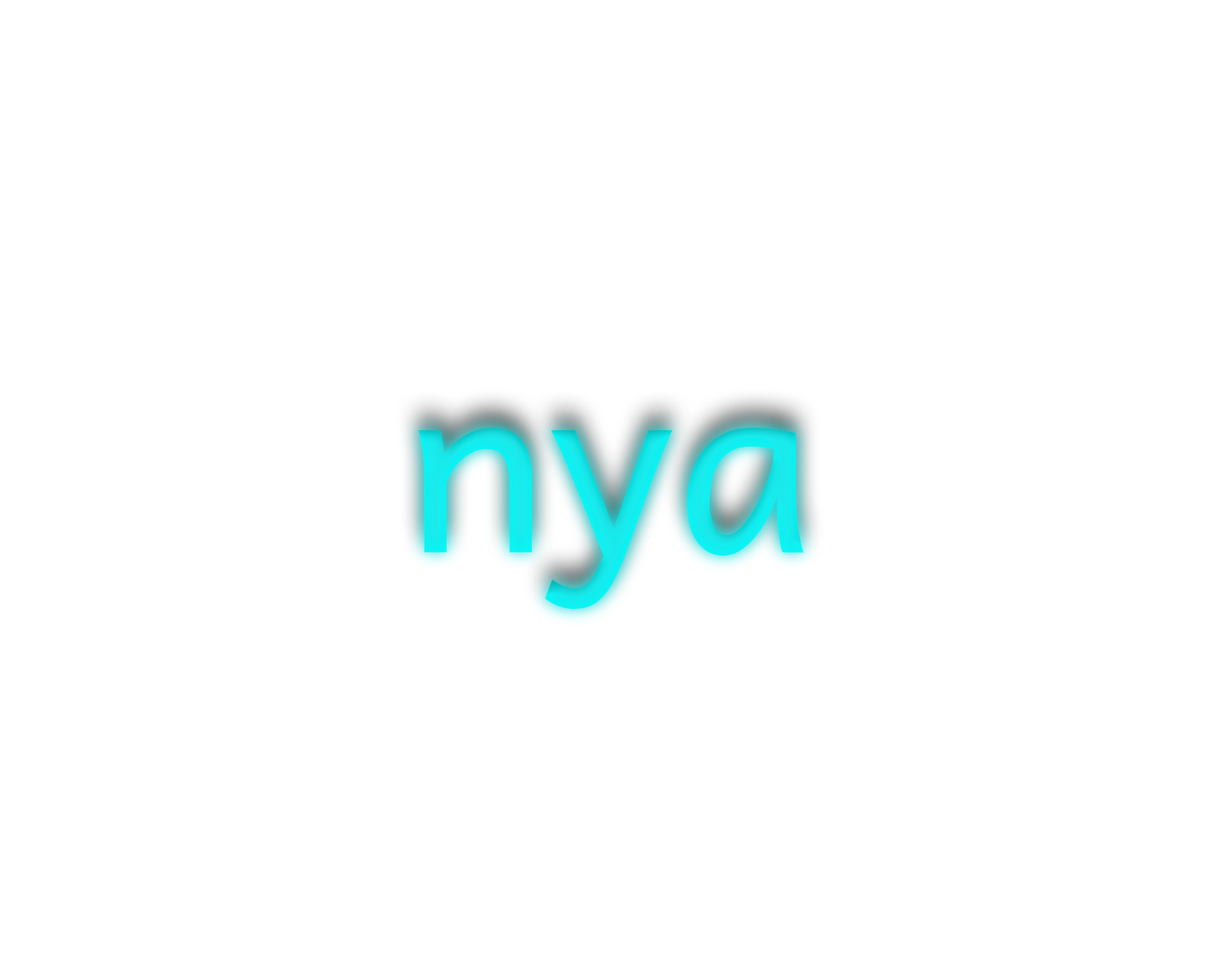
<style>
.page{position:relative;width:1222px;height:976px;background:#ffffff}
.page>*{position:absolute;margin:0}
.t1{font:245.8px "Andika";color:#16e8ea}
</style>
<div class="page">
<p class="t1" style="left:418px;top:428px;width:386px;height:181px">nya</p>
</div>
